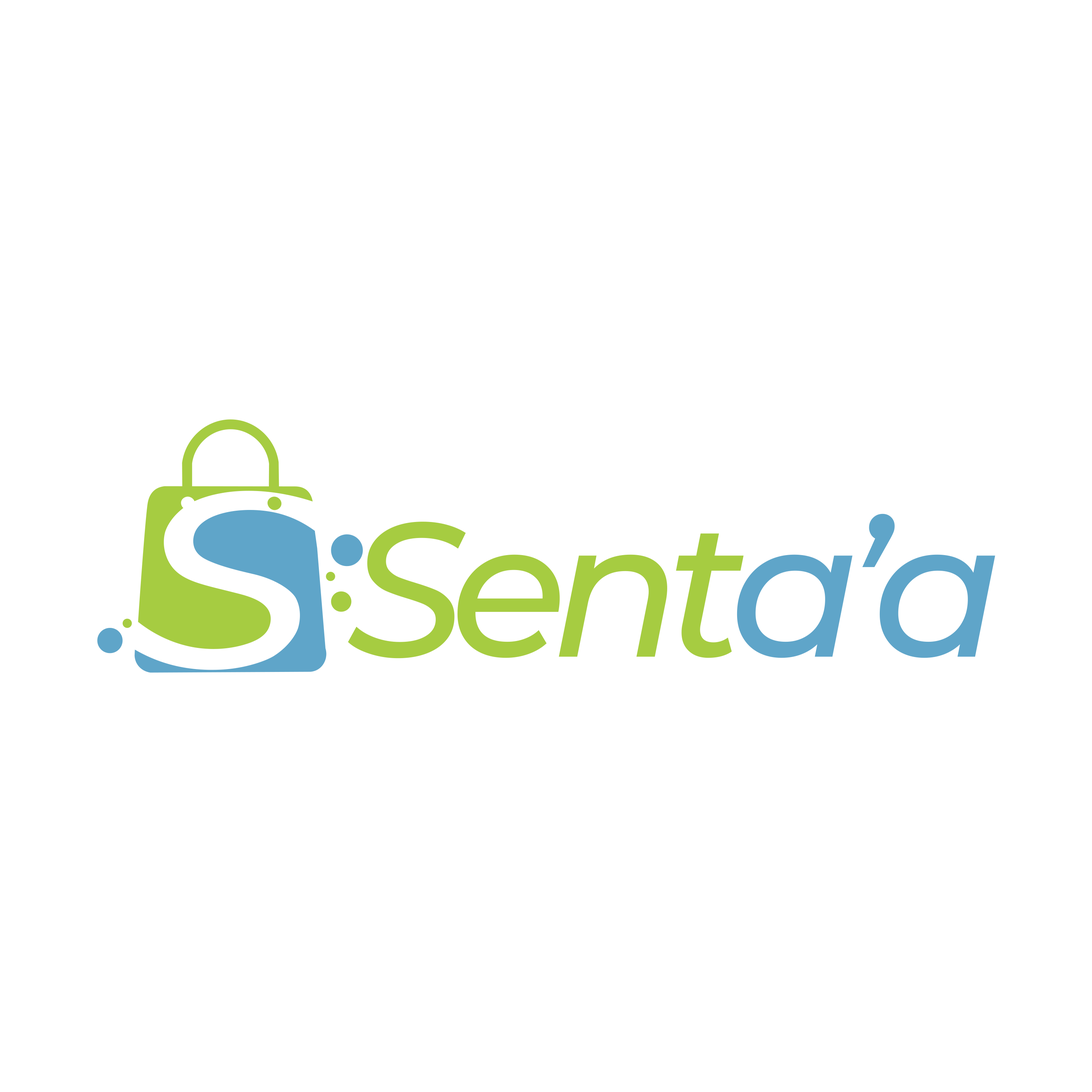
<style>
.page{position:relative;width:1092px;height:1092px;background:#ffffff}
.page>*{position:absolute;margin:0}
.t1{font:190.6px "Montserrat-MediumItalic";letter-spacing:-0.08em;color:#a6cc41}
.t2{font:190.6px "Montserrat-MediumItalic";letter-spacing:-0.08em;color:#5fa5c9}
</style>
<div class="page">
<p class="t1" style="left:348px;top:514px;width:647px;height:144px">Sent<span class="t2">a’a</span></p>
</div>
